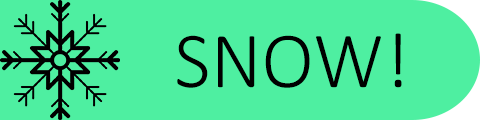
<style>
.page{position:relative;width:480px;height:120px;background:#4eefa1}
.page>*{position:absolute;margin:0}
.t1{font:80px "Calibri-Light";color:#000000}
</style>
<div class="page">
<p class="t1" style="left:177px;top:33px;width:225px;height:55px">SNOW!</p>
</div>
